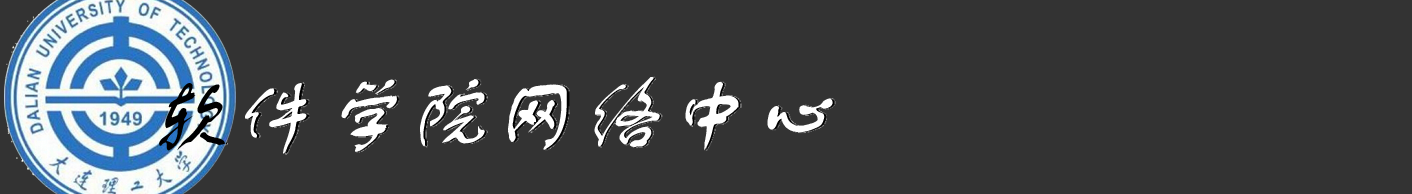
<style>
.page{position:relative;width:1412px;height:194px;background:#333333}
.page>*{position:absolute;margin:0}
.t1{font:86.3px "FZSTK--GBK1-0";color:#ffffff;font-style:italic}
.t2{font:86.3px "FZSTK--GBK1-0";color:#000000;font-style:italic}
</style>
<div class="page">
<p class="t1" style="left:159px;top:77px;width:674px;height:77px"><span class="t2">软</span>件学院网络中心</p>
</div>
